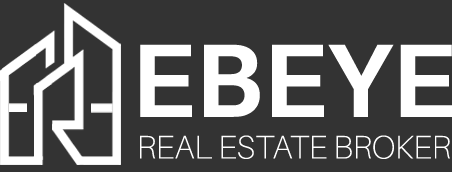
<style>
.page{position:relative;width:452px;height:172px;background:#333333}
.page>*{position:absolute;margin:0}
.t1{font:104.3px "Aileron-Bold";color:#ffffff}
.t2{font:32.6px "Aileron-Thin";color:#ffffff}
</style>
<div class="page">
<p class="t1" style="left:140px;top:44px;width:313px;height:73px">EBEYE</p>
<p class="t2" style="left:140px;top:135px;width:310px;height:24px">REAL ESTATE BROKER</p>
</div>
